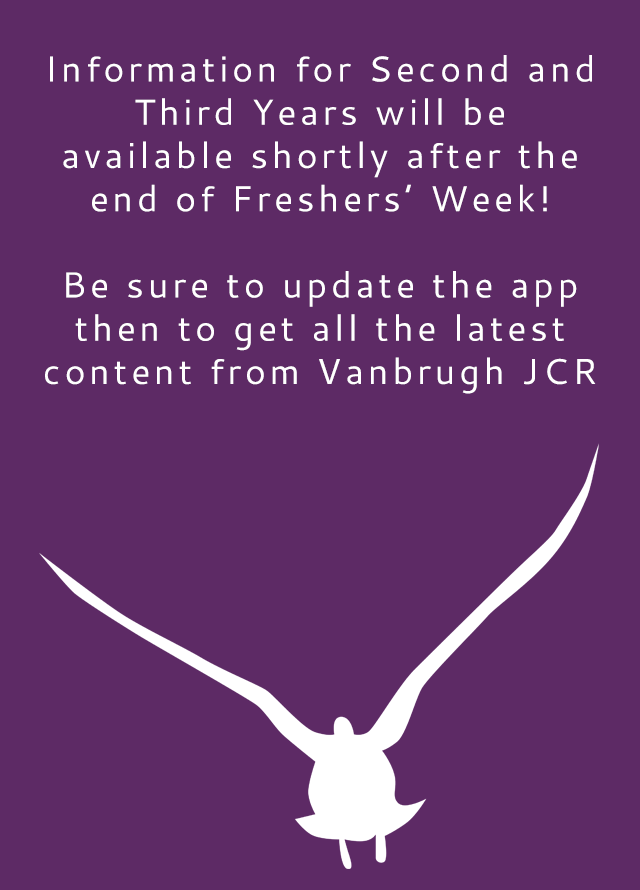
<style>
.page{position:relative;width:640px;height:890px;background:#5d2a65}
.page>*{position:absolute;margin:0}
.t1{font:36px "Cantarell-Regular";letter-spacing:0.1em;color:#ffffff}
</style>
<div class="page">
<p class="t1" style="left:45px;top:55px;width:551px;height:339px;text-align:center">Information for Second and Third Years will be available shortly after the end of Freshers’ Week!<br><br>Be sure to update the app then to get all the latest content from Vanbrugh JCR</p>
</div>
